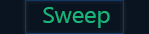
<style>
.page{position:relative;width:149px;height:34px;background:#0a1421}
.page>*{position:absolute;margin:0}
.t1{font:23.3px "SegoeUISymbol";color:#19b579}
</style>
<div class="page">
<p class="t1" style="left:43px;top:7px;width:67px;height:21px">Sweep</p>
</div>
